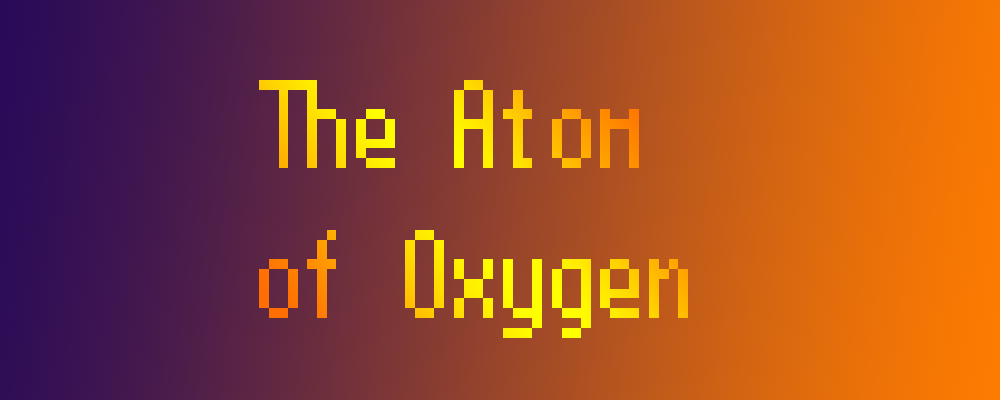
<style>
.page{position:relative;width:1000px;height:400px}
.page>*{position:absolute;margin:0}
.t1{font:125px "Terminal"}
</style>
<div class="page">
<p class="t1" style="left:259px;top:80px;width:429px;height:258px;text-align:center">The Atom <br>of Oxygen</p>
</div>
